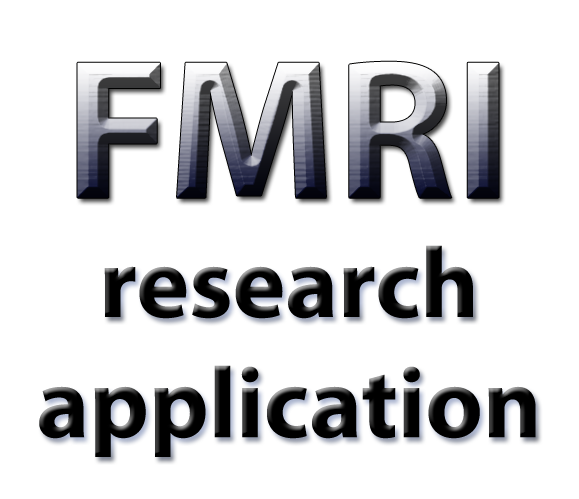
<style>
.page{position:relative;width:579px;height:499px;background:#ffffff}
.page>*{position:absolute;margin:0}
.t1{font:200px "MyriadPro-Bold"}
.t2{font:100px "MyriadPro-Bold";color:#000000}
</style>
<div class="page">
<p class="t1" style="left:77px;top:61px;width:422px;height:137px">FMRI</p>
<p class="t2" style="left:39px;top:245px;width:497px;height:212px;text-align:center">research<br>application</p>
</div>
